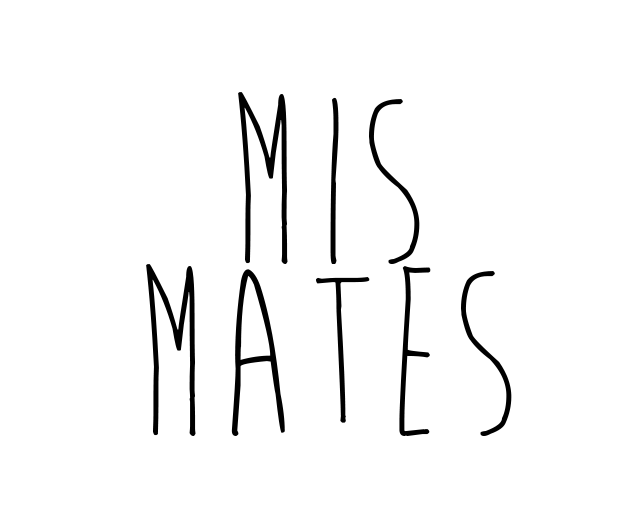
<style>
.page{position:relative;width:636px;height:529px;background:#ffffff}
.page>*{position:absolute;margin:0}
.t1{font:250px "BrainFlower";color:#010101}
.t2{font:250px "BrainFlower";color:#000000}
</style>
<div class="page">
<p class="t1" style="left:238px;top:92px;width:182px;height:172px">Mis</p>
<p class="t2" style="left:146px;top:264px;width:366px;height:172px">Mates</p>
</div>
